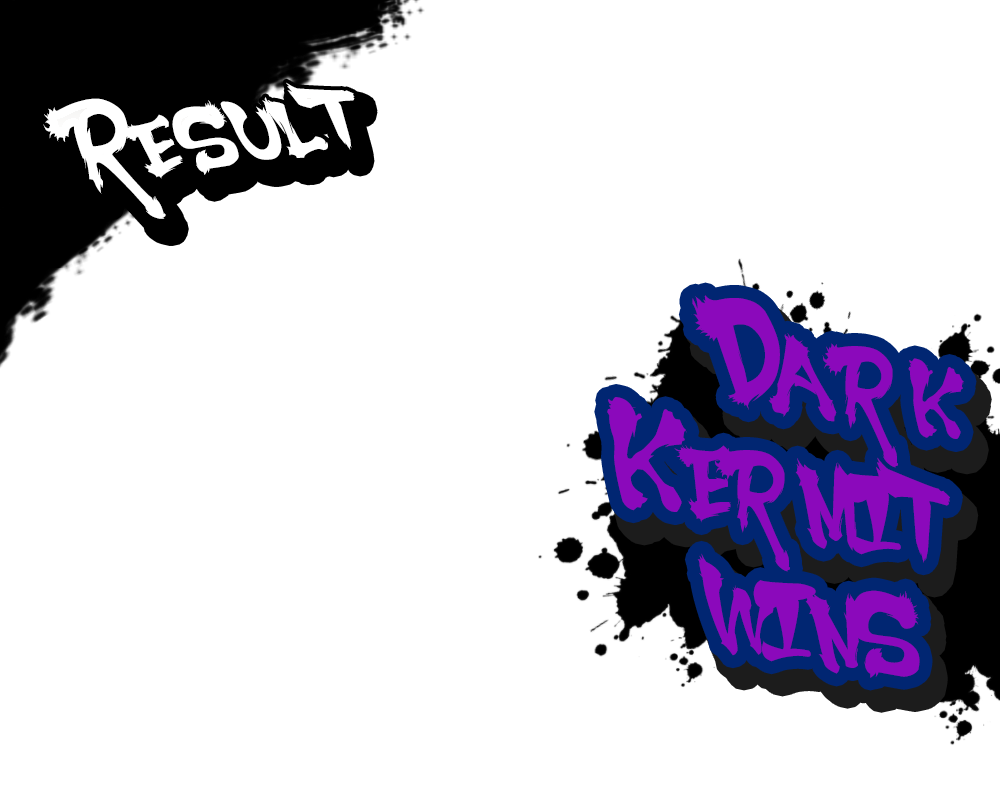
<style>
.page{position:relative;width:1000px;height:800px;background:#ffffff}
.page>*{position:absolute;margin:0}
.t1{font:80.4px "SSF4-ABUKET-Regular";color:#ffffff;font-variant:small-caps}
.t2{font:80.4px "SSF4-ABUKET-Regular";letter-spacing:-0.24em;color:#ffffff;font-variant:small-caps}
.t3{font:80.4px "SSF4-ABUKET-Regular";letter-spacing:0.16em;color:#ffffff;font-variant:small-caps;scale:1.13 1}
.t4{font:80.4px "SSF4-ABUKET-Regular";letter-spacing:0.2em;color:#ffffff;font-variant:small-caps;scale:1.03 1}
.t5{font:100.5px "SSF4-ABUKET-Regular";color:#8b09bb;font-variant:small-caps}
</style>
<div class="page">
<p class="t1" style="left:43px;top:82px;width:312px;height:137px;rotate:-9deg"><span class="t2">R</span><span class="t3">e</span>sul<span class="t4">t</span></p>
<p class="t5" style="left:607px;top:295px;width:357px;height:383px;text-align:right;rotate:10deg">Dark<br>Kermit<br>wins</p>
</div>
